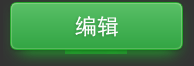
<style>
.page{position:relative;width:194px;height:66px}
.page>*{position:absolute;margin:0}
.t1{font:22px "SimHei";color:#ffffff}
</style>
<div class="page">
<p class="t1" style="left:75px;top:16px;width:43px;height:21px">编辑</p>
</div>
